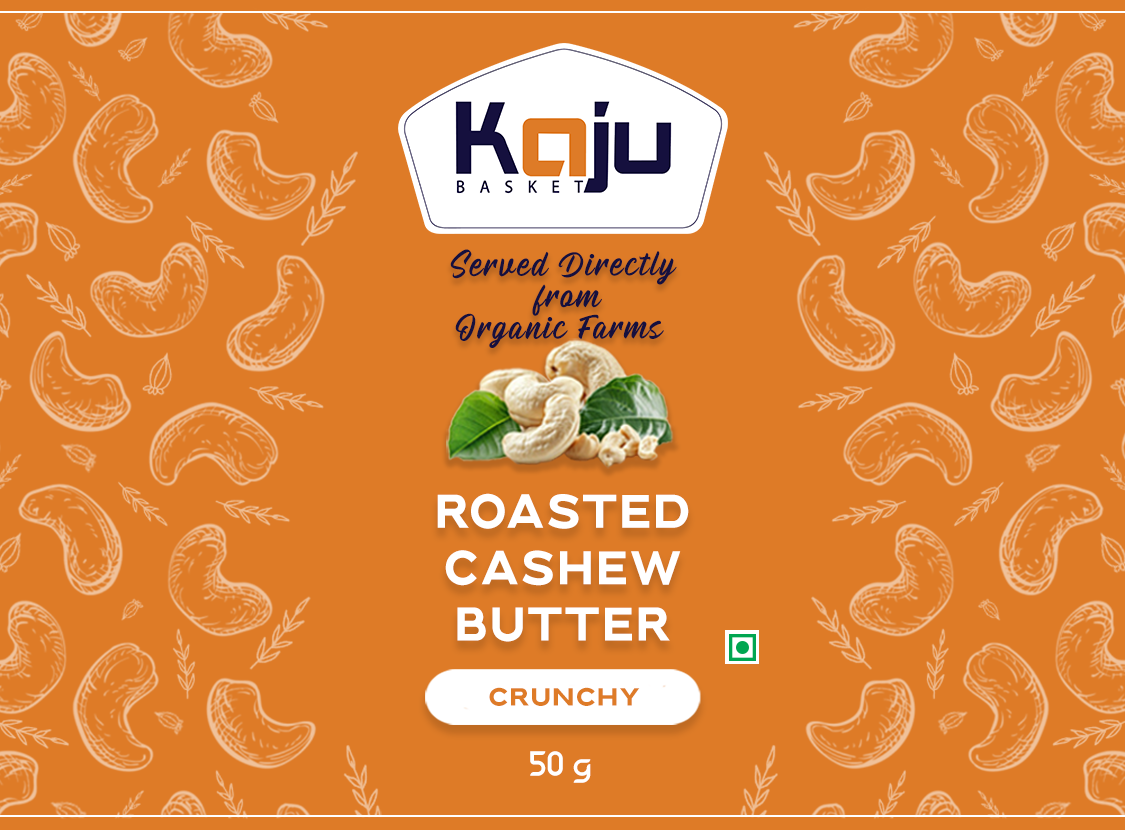
<style>
.page{position:relative;width:1125px;height:830px;background:#de7b27}
.page>*{position:absolute;margin:0}
.t1{font:34.4px/31.5px "BillskatesDEMO";letter-spacing:0.04em;color:#15103e}
.t2{font:47px "Brolink-DEMO";letter-spacing:0.04em;color:#ffffff;scale:0.91 1}
.t3{font:24.5px "Brolink-DEMO";letter-spacing:0.04em;color:#de7b27}
.t4{font:34.7px "Cano";color:#ffffff}
</style>
<div class="page">
<p class="t1" style="left:450px;top:249px;width:227px;height:99px;text-align:center">Served Directly<br> from<br>Organic Farms</p>
<p class="t2" style="left:437px;top:493px;width:252px;height:149px;text-align:center">ROASTED<br>CASHEW<br>BUTTER</p>
<p class="t3" style="left:489px;top:687px;width:151px;height:19px">CRUNCHY</p>
<p class="t4" style="left:530px;top:751px;width:61px;height:32px">50 g</p>
</div>
